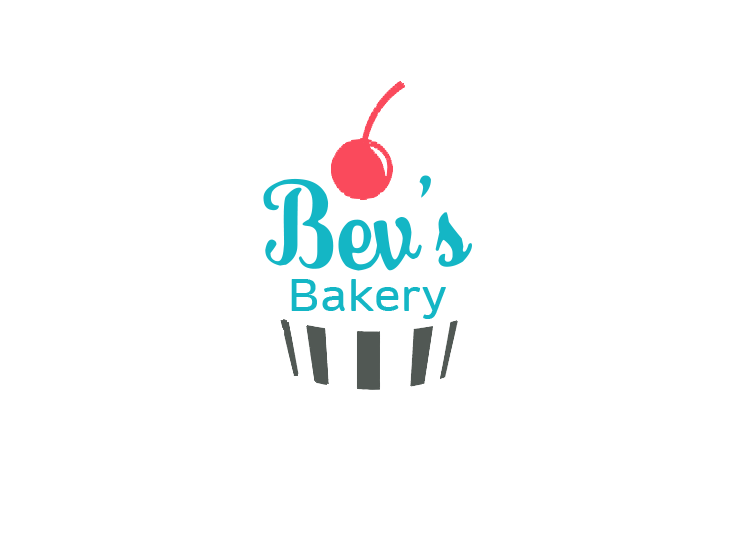
<style>
.page{position:relative;width:736px;height:552px;background:#ffffff}
.page>*{position:absolute;margin:0}
.t1{font:108px "LynchburgScript";color:#14b6c5}
.t2{font:43.2px "DaytonaW01-Regular";color:#14b6c5;scale:1.11 1}
</style>
<div class="page">
<p class="t1" style="left:263px;top:175px;width:209px;height:96px">Bev’s</p>
<p class="t2" style="left:291px;top:279px;width:155px;height:40px">Bakery</p>
</div>
